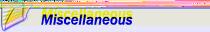
<style>
.page{position:relative;width:210px;height:32px;background:#e6e6dc}
.page>*{position:absolute;margin:0}
.t1{font:15px "FranklinGothic-MediumItalic";color:#0000dc}
</style>
<div class="page">
<p class="t1" style="left:41px;top:14px;width:92px;height:11px">Miscellaneous</p>
</div>
